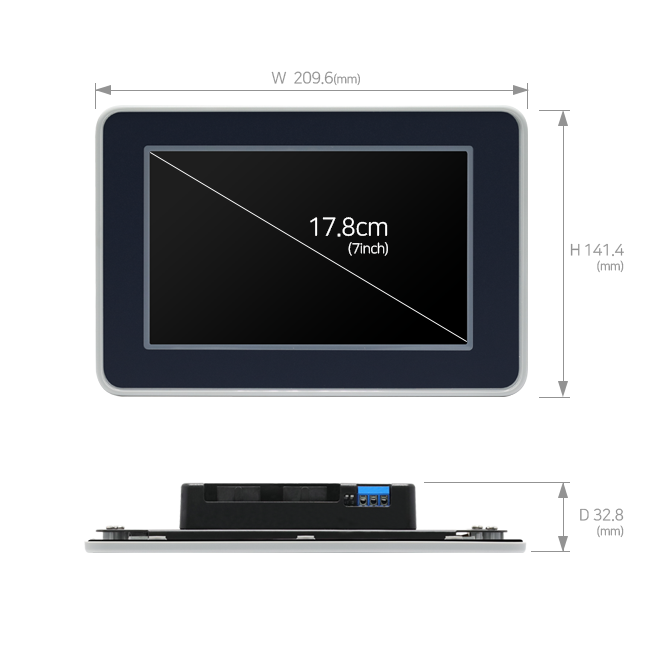
<style>
.page{position:relative;width:650px;height:650px;background:#ffffff}
.page>*{position:absolute;margin:0}
.t1{font:16px "NanumSquareR";letter-spacing:-0.03em;color:#939393}
.t2{font:12px "NanumSquareR";letter-spacing:-0.03em;color:#939393}
.t3{font:14px/18px "NanumSquareR";letter-spacing:-0.03em;color:#ffffff}
.t4{font:25px/18px "NanumSquareR";letter-spacing:-0.03em;color:#ffffff}
.t5{font:16px/15px "NanumSquareR";letter-spacing:-0.03em;color:#939393}
.t6{font:12px/15px "NanumSquareR";letter-spacing:-0.03em;color:#939393}
</style>
<div class="page">
<p class="t1" style="left:271px;top:71px;width:89px;height:15px">W  209.6<span class="t2">(mm)</span></p>
<p class="t3" style="left:310px;top:217px;width:78px;height:39px;text-align:right"><span class="t4">17.8cm<br></span>(7inch)</p>
<p class="t5" style="left:570px;top:243px;width:54px;height:30px;text-align:right">H 141.4<br><span class="t6">(mm)</span></p>
<p class="t5" style="left:580px;top:508px;width:44px;height:30px;text-align:right">D 32.8<br><span class="t6">(mm)</span></p>
</div>
